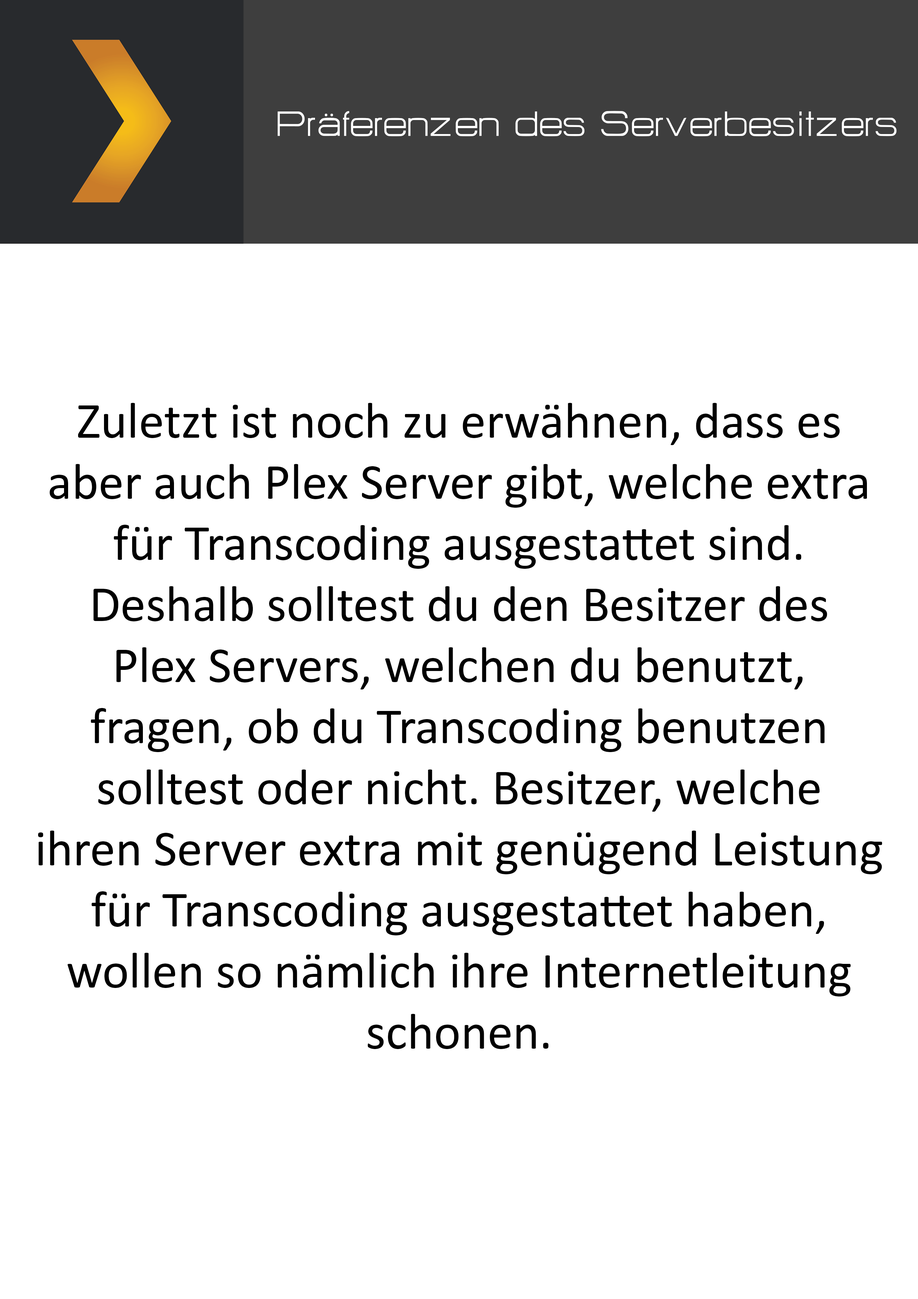
<style>
.page{position:relative;width:918px;height:1299px;background:#ffffff}
.page>*{position:absolute;margin:0}
.t1{font:43.2px "HURTMOLDPersonalUse-Regular";color:#ffffff}
.t2{font:50.9px "Calibri";color:#000000}
</style>
<div class="page">
<p class="t1" style="left:278px;top:111px;width:619px;height:25px">Präferenzen des Serverbesitzers</p>
<p class="t2" style="left:38px;top:403px;width:844px;height:646px;text-align:center">Zuletzt ist noch zu erwähnen, dass es<br>aber auch Plex Server gibt, welche extra<br>für Transcoding ausgestattet sind.<br>Deshalb solltest du den Besitzer des<br>Plex Servers, welchen du benutzt,<br>fragen, ob du Transcoding benutzen<br>solltest oder nicht. Besitzer, welche<br>ihren Server extra mit genügend Leistung<br>für Transcoding ausgestattet haben,<br>wollen so nämlich ihre Internetleitung<br>schonen.</p>
</div>
